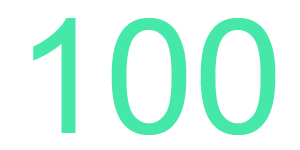
<style>
.page{position:relative;width:300px;height:150px;background:#ffffff}
.page>*{position:absolute;margin:0}
.t1{font:160px "ArialMT";color:#46e8a9}
</style>
<div class="page">
<p class="t1" style="left:33px;top:18px;width:243px;height:117px">100</p>
</div>
